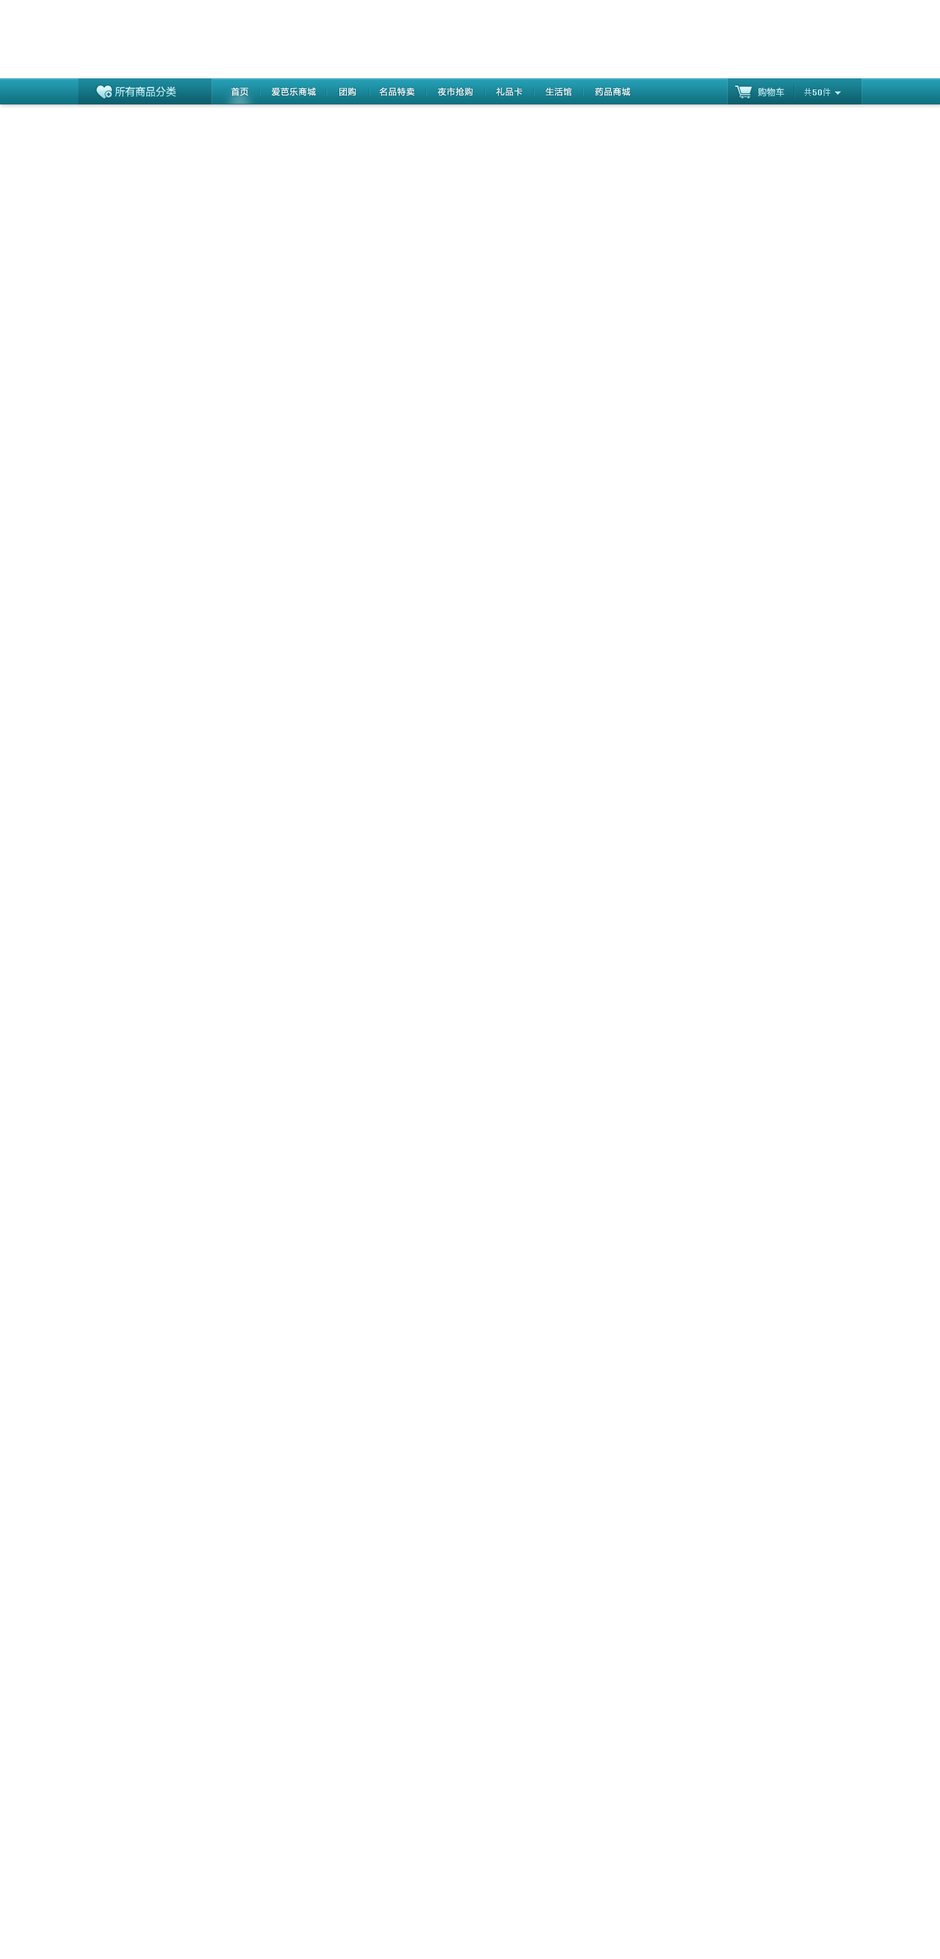
<style>
.page{position:relative;width:940px;height:1959px;background:#ffffff}
.page>*{position:absolute;margin:0}
.t1{font:10.6px "FZLTHJW--GB1-0";letter-spacing:0.01em;scale:0.95 1}
.t2{font:8.7px "FZLTHJW--GB1-0";letter-spacing:0.055em;color:#fefefe}
.t3{font:9.3px "FZLTHJW--GB1-0";letter-spacing:0.01em;scale:0.95 1}
.t4{font:8.5px "SimSun";color:#b8e7ef;font-weight:bold}
.t5{font:8.5px "SimSun";color:#b8e7ef}
</style>
<div class="page">
<p class="t1" style="left:115px;top:86px;width:61px;height:11px">所有商品分类</p>
<p class="t2" style="left:231px;top:87px;width:400px;height:9px">首页        爱芭乐商城        团购        名品特卖        夜市抢购        礼品卡        生活馆        药品商城</p>
<p class="t3" style="left:758px;top:88px;width:27px;height:9px">购物车</p>
<p class="t4" style="left:804px;top:88px;width:27px;height:8px"><span class="t5">共</span>50<span class="t5">件</span></p>
</div>
